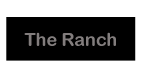
<style>
.page{position:relative;width:146px;height:73px;background:#ffffff}
.page>*{position:absolute;margin:0}
.t1{font:18px "ArialRoundedMTBold";color:#827d7d}
.t2{font:14px "ArialRoundedMTBold";color:#827d7d}
</style>
<div class="page">
<p class="t1" style="left:24px;top:32px;width:92px;height:14px"><span class="t2"><br></span>The Ranch</p>
</div>
